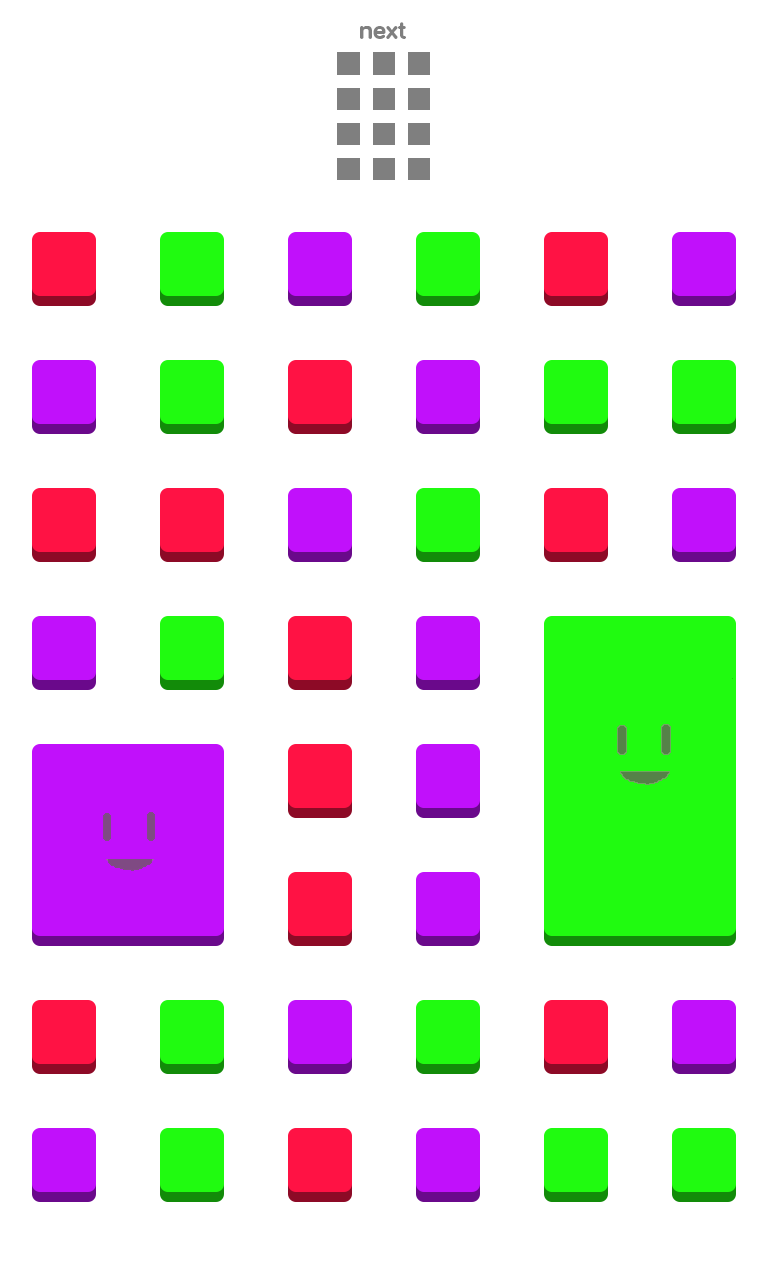
<style>
.page{position:relative;width:768px;height:1280px;background:#ffffff}
.page>*{position:absolute;margin:0}
.t1{font:28px "Bariol-Bold";color:#7f7f7f}
</style>
<div class="page">
<p class="t1" style="left:360px;top:22px;width:46px;height:17px">next</p>
</div>
